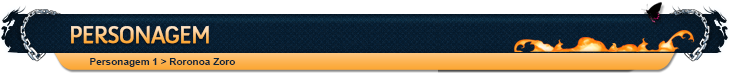
<style>
.page{position:relative;width:730px;height:80px;background:#ffffff}
.page>*{position:absolute;margin:0}
.t1{font:24px "Anivers-Regular";letter-spacing:-0.05em;text-transform:uppercase;font-weight:bold}
.t2{font:10px "Arial-BoldMT";color:#0f2538}
</style>
<div class="page">
<p class="t1" style="left:71px;top:25px;width:138px;height:19px">PERSONAGEM</p>
<p class="t2" style="left:90px;top:58px;width:146px;height:9px">Personagem 1 &gt; Roronoa Zoro</p>
</div>
